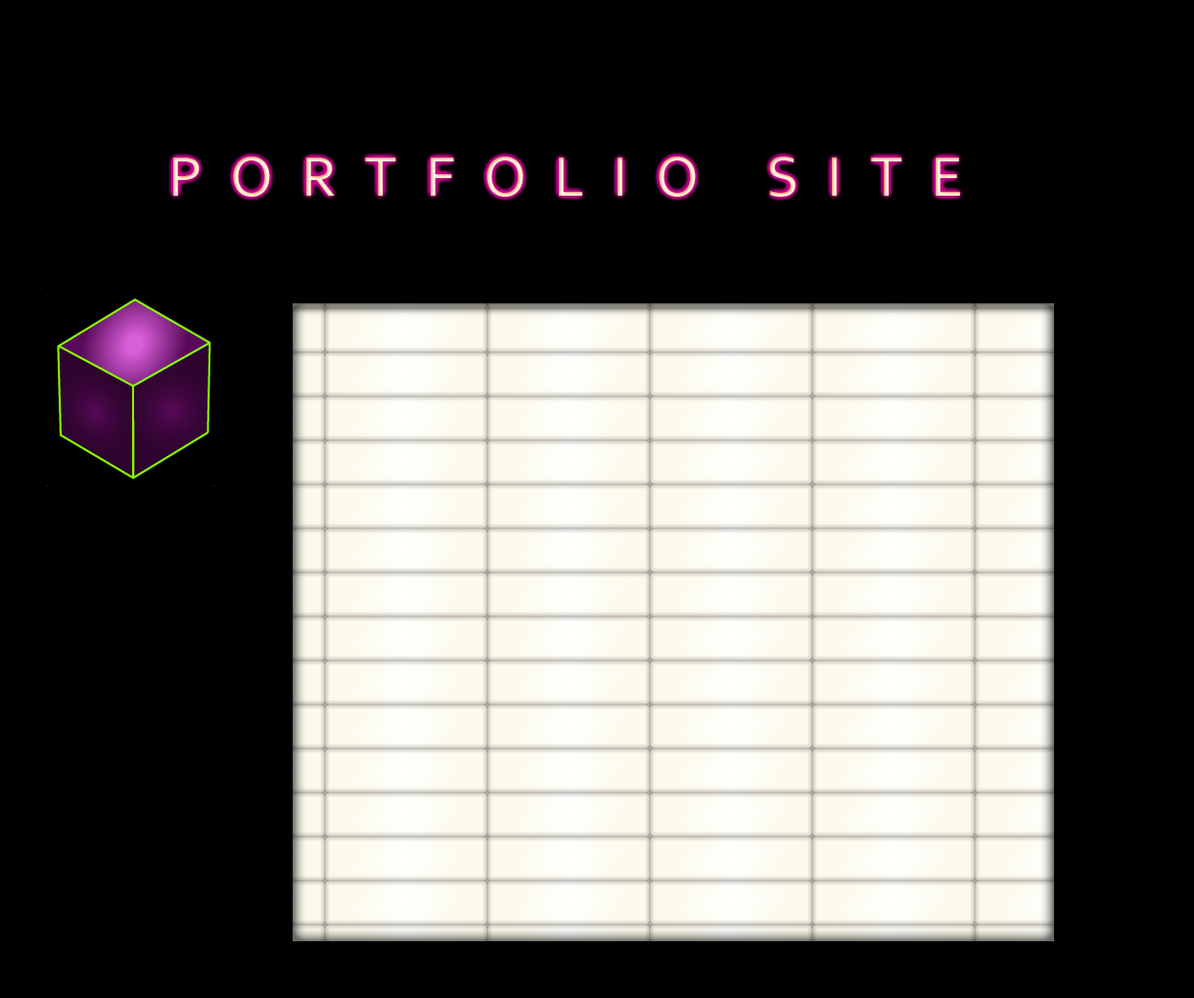
<style>
.page{position:relative;width:1194px;height:998px;background:#000000}
.page>*{position:absolute;margin:0}
.t1{font:58.7px "Corbel";letter-spacing:0.48em}
</style>
<div class="page">
<p class="t1" style="left:173px;top:157px;width:787px;height:40px">PORTFOLIO SITE</p>
</div>
